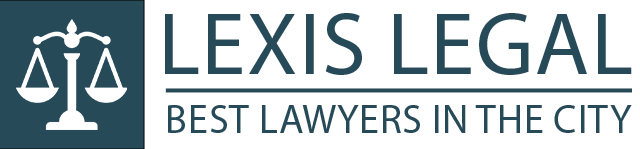
<style>
.page{position:relative;width:640px;height:149px;background:#ffffff}
.page>*{position:absolute;margin:0}
.t1{font:88.8px "MyriadPro-Regular";color:#274a59;text-transform:uppercase}
.t2{font:40.3px "MyriadPro-Regular";color:#274a59;text-transform:uppercase}
</style>
<div class="page">
<p class="t1" style="left:165px;top:13px;width:467px;height:62px">Lexis legal</p>
<p class="t2" style="left:168px;top:105px;width:464px;height:28px">Best Lawyers in the City</p>
</div>
